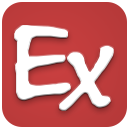
<style>
.page{position:relative;width:128px;height:128px;background:#ffffff}
.page>*{position:absolute;margin:0}
.t1{font:122.6px "BuxtonSketch";color:#ffffff;scale:1.23 1}
</style>
<div class="page">
<p class="t1" style="left:14px;top:25px;width:57px;height:76px">E</p>
<p class="t1" style="left:59px;top:45px;width:55px;height:66px">x</p>
</div>
